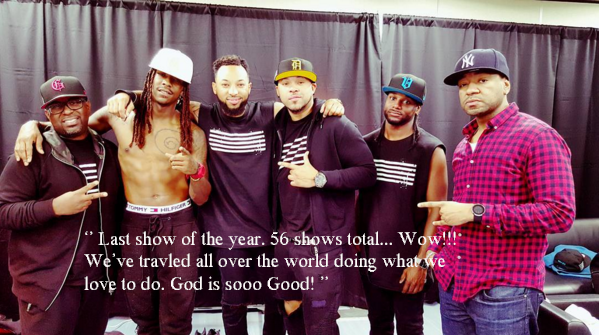
<style>
.page{position:relative;width:599px;height:335px}
.page>*{position:absolute;margin:0}
.t1{font:18.7px "MS Serif";color:#fcf8f8}
</style>
<div class="page">
<p class="t1" style="left:84px;top:231px;width:372px;height:59px">‘’ Last show of the year. 56 shows total... Wow!!! <br>We’ve travled all over the world doing what we love to do. God is sooo Good! ’’</p>
</div>
